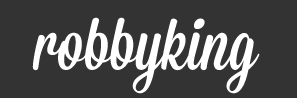
<style>
.page{position:relative;width:297px;height:98px;background:#333333}
.page>*{position:absolute;margin:0}
.t1{font:72px "Mission-Script";color:#ffffff}
</style>
<div class="page">
<p class="t1" style="left:32px;top:17px;width:228px;height:77px">robbyking</p>
</div>
